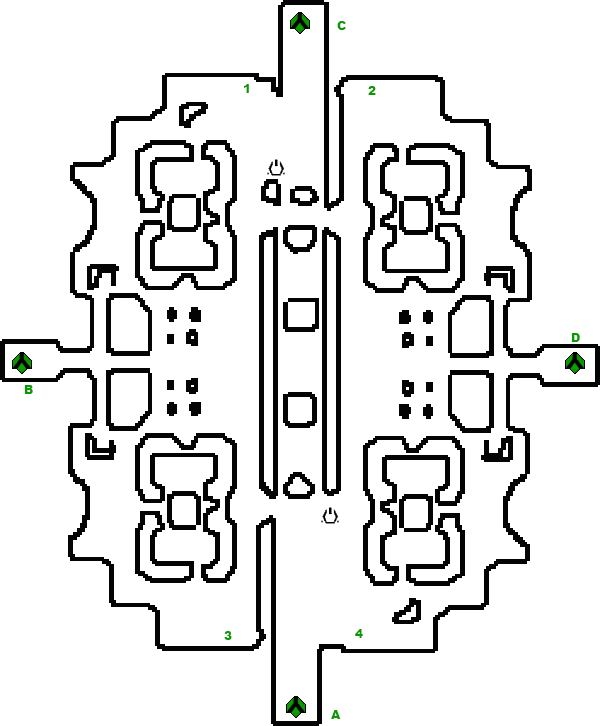
<style>
.page{position:relative;width:600px;height:726px;background:#ffffff}
.page>*{position:absolute;margin:0}
.t1{font:12px "Arial-Black";color:#0c9801}
</style>
<div class="page">
<p class="t1" style="left:337px;top:21px;width:9px;height:9px">C</p>
<p class="t1" style="left:244px;top:84px;width:5px;height:9px">1</p>
<p class="t1" style="left:368px;top:86px;width:8px;height:9px">2</p>
<p class="t1" style="left:571px;top:333px;width:9px;height:9px">D</p>
<p class="t1" style="left:24px;top:385px;width:9px;height:9px">B</p>
<p class="t1" style="left:355px;top:629px;width:8px;height:9px">4</p>
<p class="t1" style="left:224px;top:631px;width:8px;height:9px">3</p>
<p class="t1" style="left:331px;top:710px;width:10px;height:9px">A</p>
</div>
